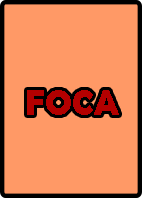
<style>
.page{position:relative;width:142px;height:198px;background:#ff9966}
.page>*{position:absolute;margin:0}
.t1{font:36px "BerlinSansFBDemi-Bold";color:#b30000}
</style>
<div class="page">
<p class="t1" style="left:27px;top:90px;width:92px;height:25px">FOCA</p>
</div>
